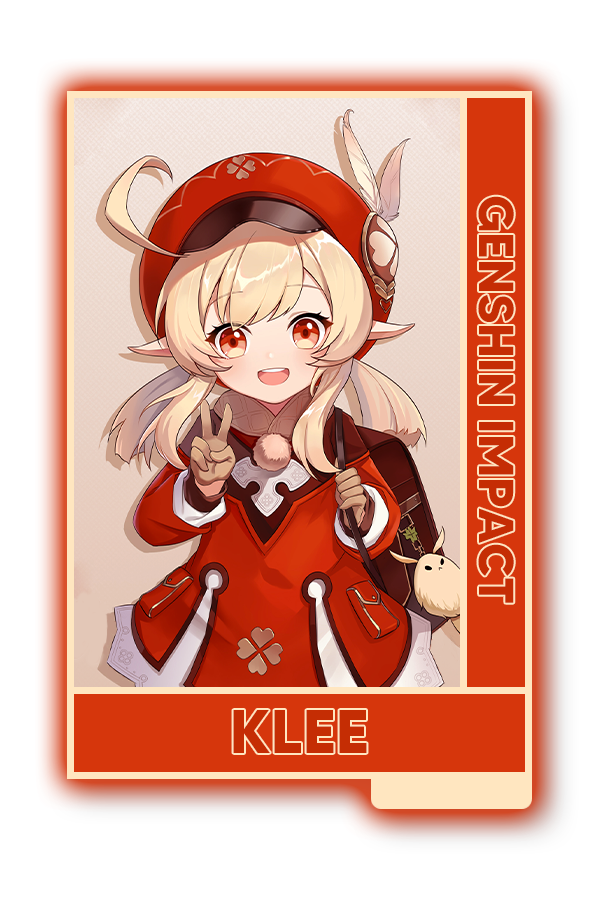
<style>
.page{position:relative;width:600px;height:900px;background:#ffffff}
.page>*{position:absolute;margin:0}
.t1{font:48.8px "MADETOMMY-Bold";color:#c52d04}
.t2{font:61.5px "MADETOMMY-Bold";color:#c52d04}
</style>
<div class="page">
<p class="t1" style="left:478px;top:196px;width:36px;height:407px;rotate:90deg">GENSHIN IMPACT</p>
<p class="t2" style="left:233px;top:710px;width:134px;height:43px">KLEE</p>
</div>
